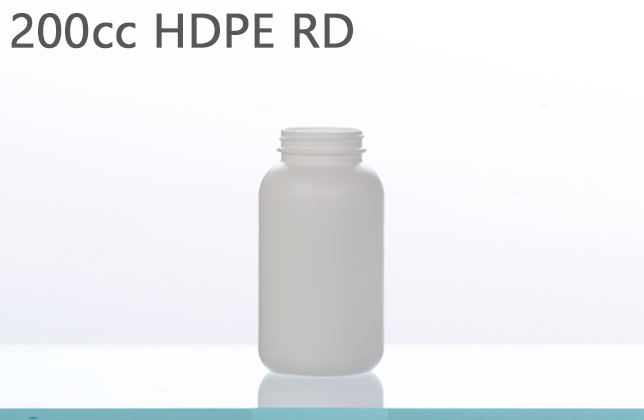
<style>
.page{position:relative;width:644px;height:420px}
.page>*{position:absolute;margin:0}
.t1{font:48px "Gadugi";color:#575757;font-weight:bold}
</style>
<div class="page">
<p class="t1" style="left:11px;top:13px;width:342px;height:36px">200cc HDPE RD</p>
</div>
